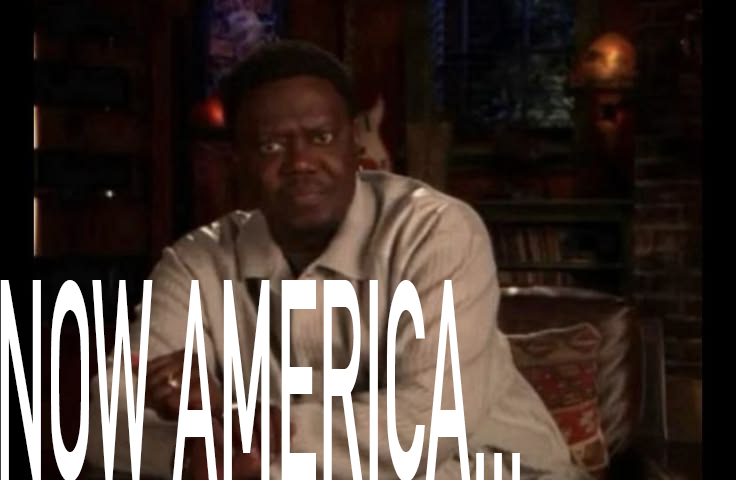
<style>
.page{position:relative;width:736px;height:480px}
.page>*{position:absolute;margin:0}
.t1{font:282px "DINAlternate-Bold";color:#ffffff;scale:0.27 1}
</style>
<div class="page">
<p class="t1" style="left:0px;top:280px;width:520px;height:202px">NOW AMERICA...</p>
</div>
